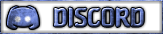
<style>
.page{position:relative;width:163px;height:34px}
.page>*{position:absolute;margin:0}
.t1{font:24px "MuseumClassicBold";font-weight:bold;scale:0.83 1}
</style>
<div class="page">
<p class="t1" style="left:53px;top:7px;width:91px;height:20px">DISCORD</p>
<p class="t1" style="left:53px;top:7px;width:91px;height:20px">DISCORD</p>
</div>
